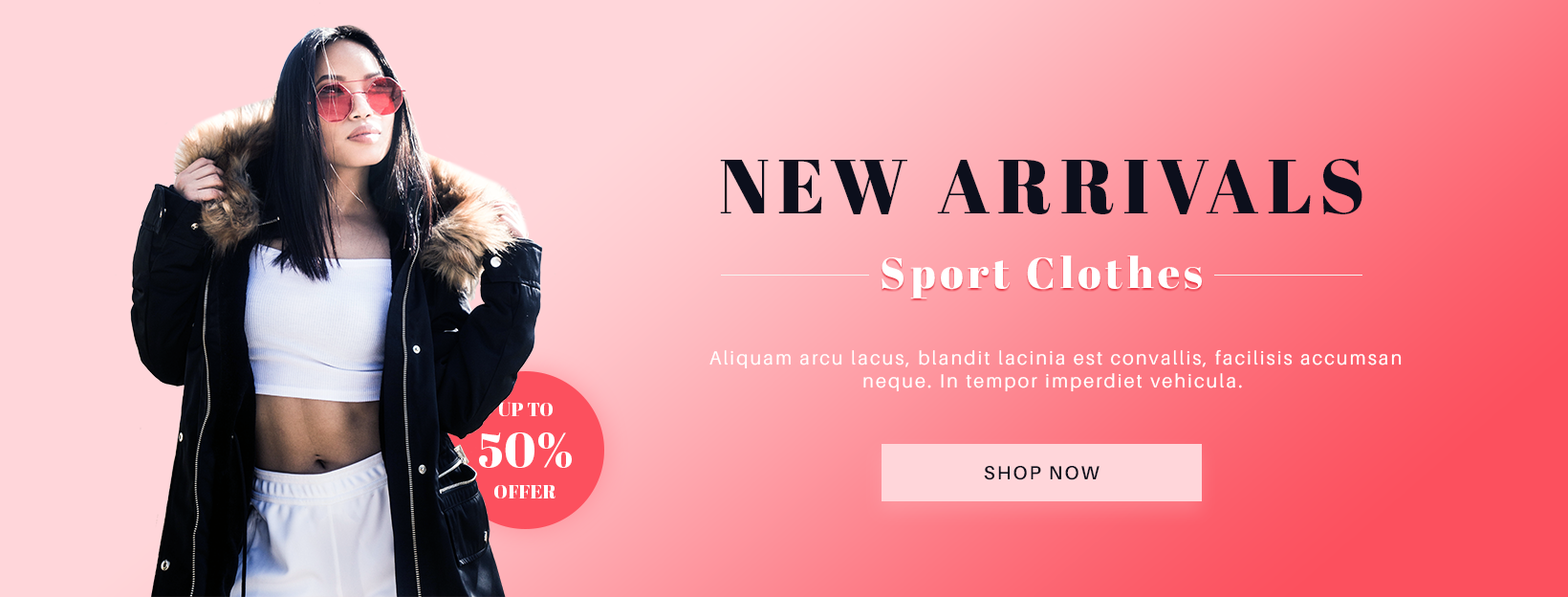
<style>
.page{position:relative;width:1568px;height:597px}
.page>*{position:absolute;margin:0}
.t1{font:76.5px "AbrilFatface-Regular";letter-spacing:0.1em;color:#0c0f1c}
.t2{font:43px "AbrilFatface-Regular";letter-spacing:0.1em;color:#ffffff}
.t3{font:19.1px "Aileron-Regular";letter-spacing:0.1em;color:#ffffff}
.t4{font:19.1px "AbrilFatface-Regular";color:#ffffff}
.t5{font:47.8px "AbrilFatface-Regular";color:#ffffff}
.t6{font:19.1px "Aileron-SemiBold";letter-spacing:0.1em;color:#0c0f1c}
</style>
<div class="page">
<p class="t1" style="left:720px;top:159px;width:642px;height:55px">NEW ARRIVALS</p>
<p class="t2" style="left:882px;top:255px;width:320px;height:43px">Sport Clothes</p>
<p class="t3" style="left:709px;top:349px;width:693px;height:43px;text-align:center">Aliquam arcu lacus, blandit lacinia est convallis, facilisis accumsan <br>neque. In tempor imperdiet vehicula.</p>
<p class="t4" style="left:498px;top:402px;width:55px;height:14px">UP TO</p>
<p class="t5" style="left:479px;top:432px;width:93px;height:36px">50%</p>
<p class="t6" style="left:984px;top:466px;width:116px;height:14px">SHOP NOW</p>
<p class="t4" style="left:494px;top:485px;width:61px;height:13px">OFFER</p>
</div>
